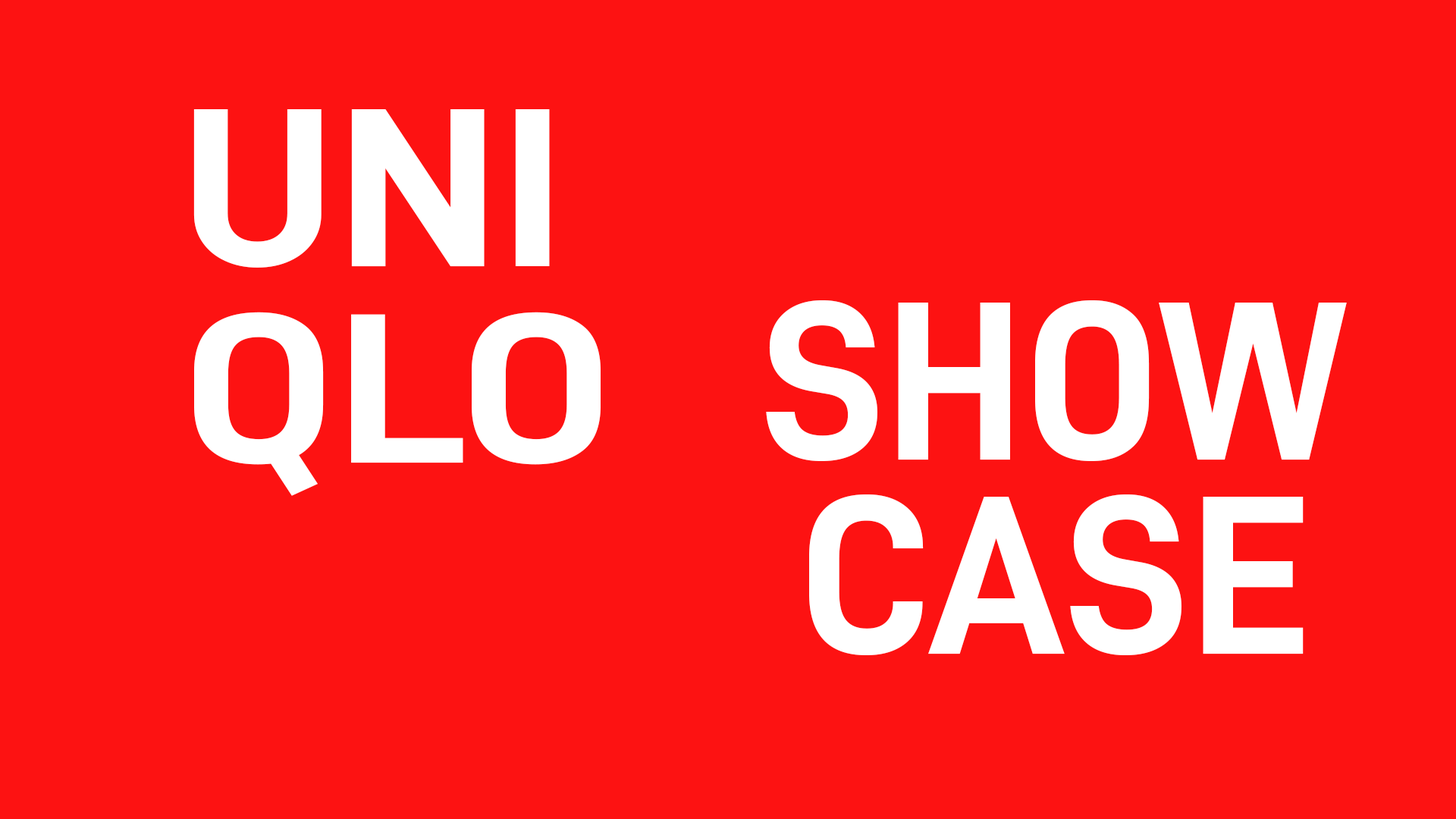
<style>
.page{position:relative;width:1456px;height:819px;background:#fd1212}
.page>*{position:absolute;margin:0}
.t1{font:227.5px "D-DIN-Bold";color:#ffffff;scale:1.13 1}
.t2{font:227.5px "D-DIN-Bold";color:#ffffff}
.t3{font:214.8px "D-DIN-Bold";color:#ffffff;scale:1.2 1}
</style>
<div class="page">
<p class="t1" style="left:193px;top:109px;width:357px;height:159px">UNI</p>
<p class="t2" style="left:766px;top:300px;width:581px;height:161px">SHOW</p>
<p class="t3" style="left:194px;top:312px;width:407px;height:184px">QLO</p>
<p class="t2" style="left:809px;top:494px;width:495px;height:161px">CASE</p>
</div>
